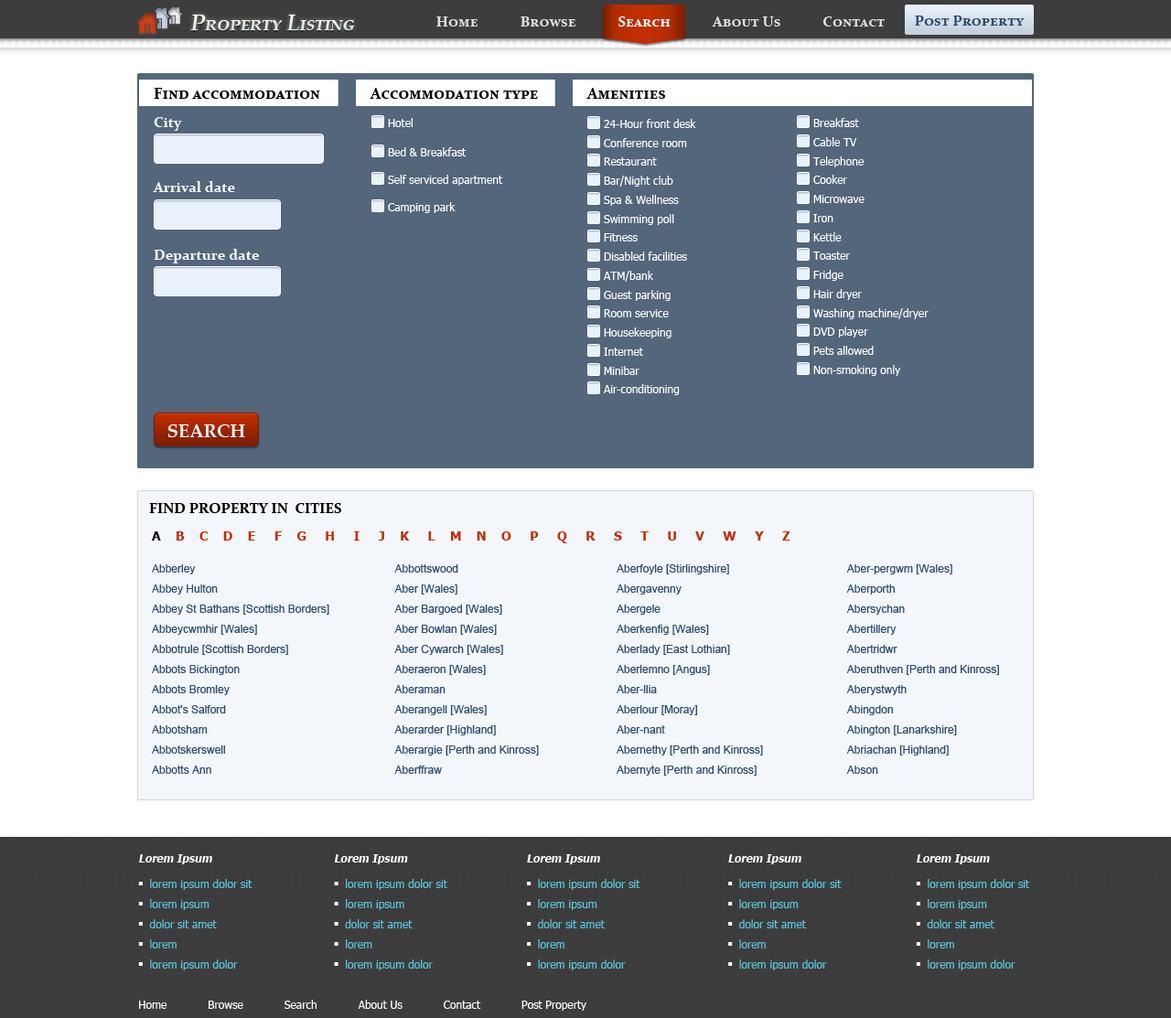
<style>
.page{position:relative;width:1171px;height:1018px;background:#ffffff}
.page>*{position:absolute;margin:0}
.t1{font:22px "PalatinoLinotype-BoldItalic";color:#e8f1fc;font-variant:small-caps}
.t2{font:14.6px "Constantia-Bold";color:#e2e1e1;font-variant:small-caps}
.t3{font:14.6px "Constantia-Bold";color:#ffffff;font-variant:small-caps}
.t4{font:14.6px "Constantia-Bold";color:#2e4c6e;font-variant:small-caps}
.t5{font:15.6px "Constantia-Bold";color:#000000;font-variant:small-caps}
.t6{font:14.6px "Constantia-Bold";color:#ffffff}
.t7{font:11px "Tahoma";color:#ffffff}
.t8{font:18.3px "PalatinoLinotype-Bold";color:#ffffff;text-transform:uppercase}
.t9{font:14.6px "Constantia-Bold";color:#000000;text-transform:uppercase}
.t10{font:12.8px "Tahoma-Bold";color:#c22e00}
.t11{font:12.8px "Tahoma-Bold";color:#181515}
.t12{font:11px/20.1px "ArialMT";color:#2e4c6e}
.t13{font:11px/20.1px "Tahoma";color:#5ac8e0}
.t14{font:11px/22px "Tahoma-Bold";color:#fefefe;font-style:italic}
.t15{font:11px/25.6px "Tahoma-Bold";color:#fefefe;font-style:italic}
.t16{font:6.4px/25.6px "Wingdings-Regular";color:#ffffff}
.t17{font:6.4px/20.1px "Wingdings-Regular";color:#ffffff}
</style>
<div class="page">
<p class="t1" style="left:190px;top:15px;width:165px;height:15px">Property Listing</p>
<p class="t2" style="left:436px;top:16px;width:449px;height:11px">Home            Browse            <span class="t3">Search</span>            About Us            Contact</p>
<p class="t4" style="left:915px;top:16px;width:110px;height:10px">Post Property</p>
<p class="t5" style="left:154px;top:88px;width:166px;height:11px">Find accommodation</p>
<p class="t5" style="left:370px;top:88px;width:168px;height:11px">Accommodation type</p>
<p class="t5" style="left:586px;top:88px;width:79px;height:11px">Amenities</p>
<p class="t6" style="left:154px;top:117px;width:28px;height:14px">City</p>
<p class="t7" style="left:388px;top:118px;width:25px;height:9px">Hotel</p>
<p class="t7" style="left:604px;top:119px;width:92px;height:9px">24-Hour front desk</p>
<p class="t7" style="left:813px;top:118px;width:46px;height:9px">Breakfast</p>
<p class="t7" style="left:813px;top:137px;width:44px;height:9px">Cable TV</p>
<p class="t7" style="left:388px;top:147px;width:79px;height:9px">Bed &amp; Breakfast</p>
<p class="t7" style="left:604px;top:138px;width:83px;height:9px">Conference room</p>
<p class="t7" style="left:604px;top:157px;width:53px;height:9px">Restaurant</p>
<p class="t7" style="left:812px;top:156px;width:53px;height:11px">Telephone</p>
<p class="t6" style="left:153px;top:181px;width:82px;height:11px">Arrival date</p>
<p class="t7" style="left:388px;top:175px;width:115px;height:11px">Self serviced apartment</p>
<p class="t7" style="left:604px;top:176px;width:69px;height:11px">Bar/Night club</p>
<p class="t7" style="left:813px;top:175px;width:34px;height:9px">Cooker</p>
<p class="t7" style="left:604px;top:195px;width:75px;height:11px">Spa &amp; Wellness</p>
<p class="t7" style="left:813px;top:195px;width:52px;height:8px">Microwave</p>
<p class="t7" style="left:388px;top:202px;width:68px;height:11px">Camping park</p>
<p class="t7" style="left:604px;top:214px;width:70px;height:11px">Swimming poll</p>
<p class="t7" style="left:813px;top:214px;width:20px;height:8px">Iron</p>
<p class="t7" style="left:604px;top:233px;width:34px;height:9px">Fitness</p>
<p class="t7" style="left:813px;top:232px;width:29px;height:10px">Kettle</p>
<p class="t6" style="left:154px;top:249px;width:105px;height:14px">Departure date</p>
<p class="t7" style="left:604px;top:252px;width:83px;height:9px">Disabled facilities</p>
<p class="t7" style="left:812px;top:252px;width:38px;height:8px">Toaster</p>
<p class="t7" style="left:813px;top:270px;width:31px;height:11px">Fridge</p>
<p class="t7" style="left:604px;top:271px;width:49px;height:11px">ATM/bank</p>
<p class="t7" style="left:604px;top:290px;width:67px;height:11px">Guest parking</p>
<p class="t7" style="left:813px;top:289px;width:49px;height:11px">Hair dryer</p>
<p class="t7" style="left:604px;top:309px;width:65px;height:8px">Room service</p>
<p class="t7" style="left:813px;top:308px;width:116px;height:11px">Washing machine/dryer</p>
<p class="t7" style="left:604px;top:328px;width:68px;height:11px">Housekeeping</p>
<p class="t7" style="left:813px;top:327px;width:55px;height:11px">DVD player</p>
<p class="t7" style="left:604px;top:348px;width:39px;height:8px">Internet</p>
<p class="t7" style="left:813px;top:346px;width:61px;height:9px">Pets allowed</p>
<p class="t7" style="left:604px;top:366px;width:36px;height:9px">Minibar</p>
<p class="t7" style="left:813px;top:365px;width:88px;height:11px">Non-smoking only</p>
<p class="t7" style="left:604px;top:384px;width:76px;height:11px">Air-conditioning</p>
<p class="t8" style="left:167px;top:425px;width:78px;height:12px">Search</p>
<p class="t9" style="left:149px;top:503px;width:192px;height:10px">Find property in  Cities</p>
<p class="t10" style="left:152px;top:532px;width:638px;height:11px"><span class="t11">A  </span>  B    C    D    E     F    G     H     I     J    K     L    M    N    O     P     Q     R     S     T     U     V     W     Y     Z</p>
<p class="t12" style="left:152px;top:564px;width:177px;height:210px">Abberley<br>Abbey Hulton<br>Abbey St Bathans [Scottish Borders]<br>Abbeycwmhir [Wales]<br>Abbotrule [Scottish Borders]<br>Abbots Bickington<br>Abbots Bromley<br>Abbot's Salford<br>Abbotsham<br>Abbotskerswell<br>Abbotts Ann</p>
<p class="t12" style="left:394px;top:564px;width:145px;height:210px">Abbottswood<br>Aber [Wales]<br>Aber Bargoed [Wales]<br>Aber Bowlan [Wales]<br>Aber Cywarch [Wales]<br>Aberaeron [Wales]<br>Aberaman<br>Aberangell [Wales]<br>Aberarder [Highland]<br>Aberargie [Perth and Kinross]<br>Aberffraw</p>
<p class="t12" style="left:617px;top:564px;width:146px;height:212px">Aberfoyle [Stirlingshire]<br>Abergavenny<br>Abergele<br>Aberkenfig [Wales]<br>Aberlady [East Lothian]<br>Aberlemno [Angus]<br>Aber-llia<br>Aberlour [Moray]<br>Aber-nant<br>Abernethy [Perth and Kinross]<br>Abernyte [Perth and Kinross]</p>
<p class="t12" style="left:846px;top:564px;width:153px;height:210px">Aber-pergwm [Wales]<br>Aberporth<br>Abersychan<br>Abertillery<br>Abertridwr<br>Aberuthven [Perth and Kinross]<br>Aberystwyth<br>Abingdon<br>Abington [Lanarkshire]<br>Abriachan [Highland]<br>Abson</p>
<p class="t13" style="left:138px;top:854px;width:115px;height:117px"><span class="t14">Lorem Ips</span><span class="t15">um<br></span><span class="t16">n </span>lorem ipsum dolor sit<br><span class="t17">n </span>lorem ipsum<br><span class="t17">n </span>dolor sit amet<br><span class="t17">n </span>lorem<br><span class="t17">n </span>lorem ipsum dolor</p>
<p class="t13" style="left:334px;top:854px;width:113px;height:117px"><span class="t14">Lorem Ips</span><span class="t15">um<br></span><span class="t16">n </span>lorem ipsum dolor sit<br><span class="t17">n </span>lorem ipsum<br><span class="t17">n </span>dolor sit amet<br><span class="t17">n </span>lorem<br><span class="t17">n </span>lorem ipsum dolor</p>
<p class="t13" style="left:527px;top:854px;width:113px;height:117px"><span class="t14">Lorem Ips</span><span class="t15">um<br></span><span class="t16">n </span>lorem ipsum dolor sit<br><span class="t17">n </span>lorem ipsum<br><span class="t17">n </span>dolor sit amet<br><span class="t17">n </span>lorem<br><span class="t17">n </span>lorem ipsum dolor</p>
<p class="t13" style="left:728px;top:854px;width:114px;height:117px"><span class="t14">Lorem Ips</span><span class="t15">um<br></span><span class="t16">n </span>lorem ipsum dolor sit<br><span class="t17">n </span>lorem ipsum<br><span class="t17">n </span>dolor sit amet<br><span class="t17">n </span>lorem<br><span class="t17">n </span>lorem ipsum dolor</p>
<p class="t13" style="left:916px;top:854px;width:114px;height:117px"><span class="t14">Lorem Ips</span><span class="t15">um<br></span><span class="t16">n </span>lorem ipsum dolor sit<br><span class="t17">n </span>lorem ipsum<br><span class="t17">n </span>dolor sit amet<br><span class="t17">n </span>lorem<br><span class="t17">n </span>lorem ipsum dolor</p>
<p class="t7" style="left:139px;top:1000px;width:447px;height:11px">Home            Browse            Search            About Us            Contact            Post Property</p>
</div>
